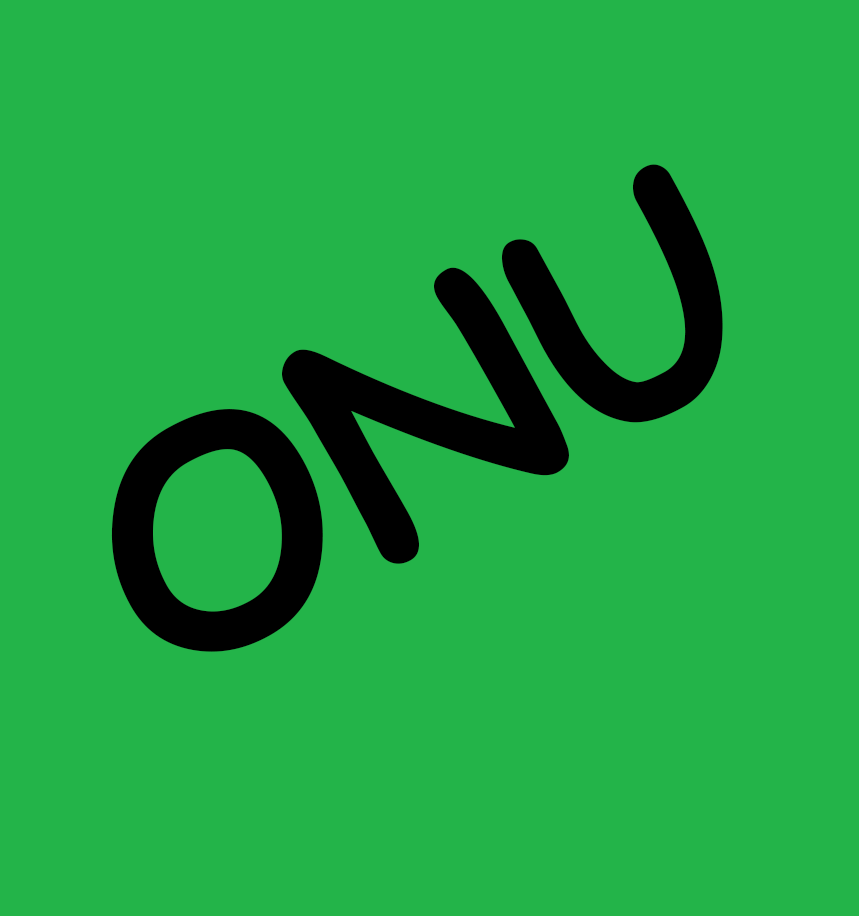
<style>
.page{position:relative;width:859px;height:916px;background:#23b449}
.page>*{position:absolute;margin:0}
.t1{font:300px "ComicSansMS-Bold";color:#000000;font-variant:small-caps}
</style>
<div class="page">
<p class="t1" style="left:111px;top:164px;width:612px;height:488px;rotate:-29deg">ONU</p>
</div>
